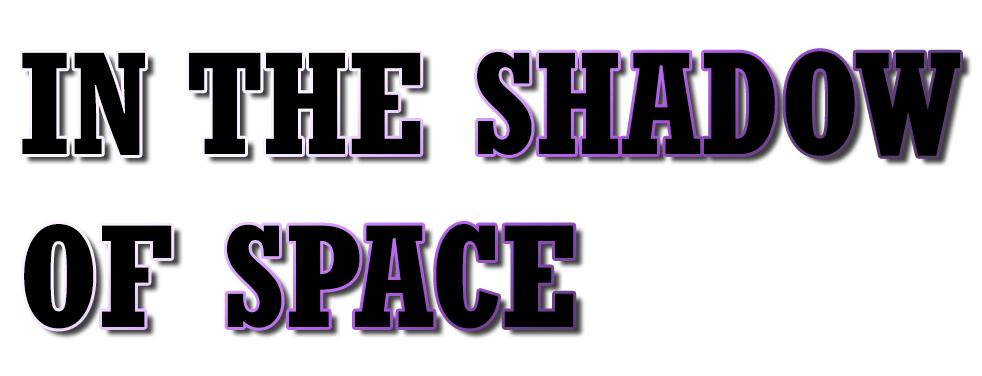
<style>
.page{position:relative;width:982px;height:376px;background:#ffffff}
.page>*{position:absolute;margin:0}
.t1{font:144px "Rockwell-CondensedBold";color:#000000}
</style>
<div class="page">
<p class="t1" style="left:22px;top:51px;width:938px;height:278px">IN THE SHADOW<br>OF SPACE</p>
</div>
